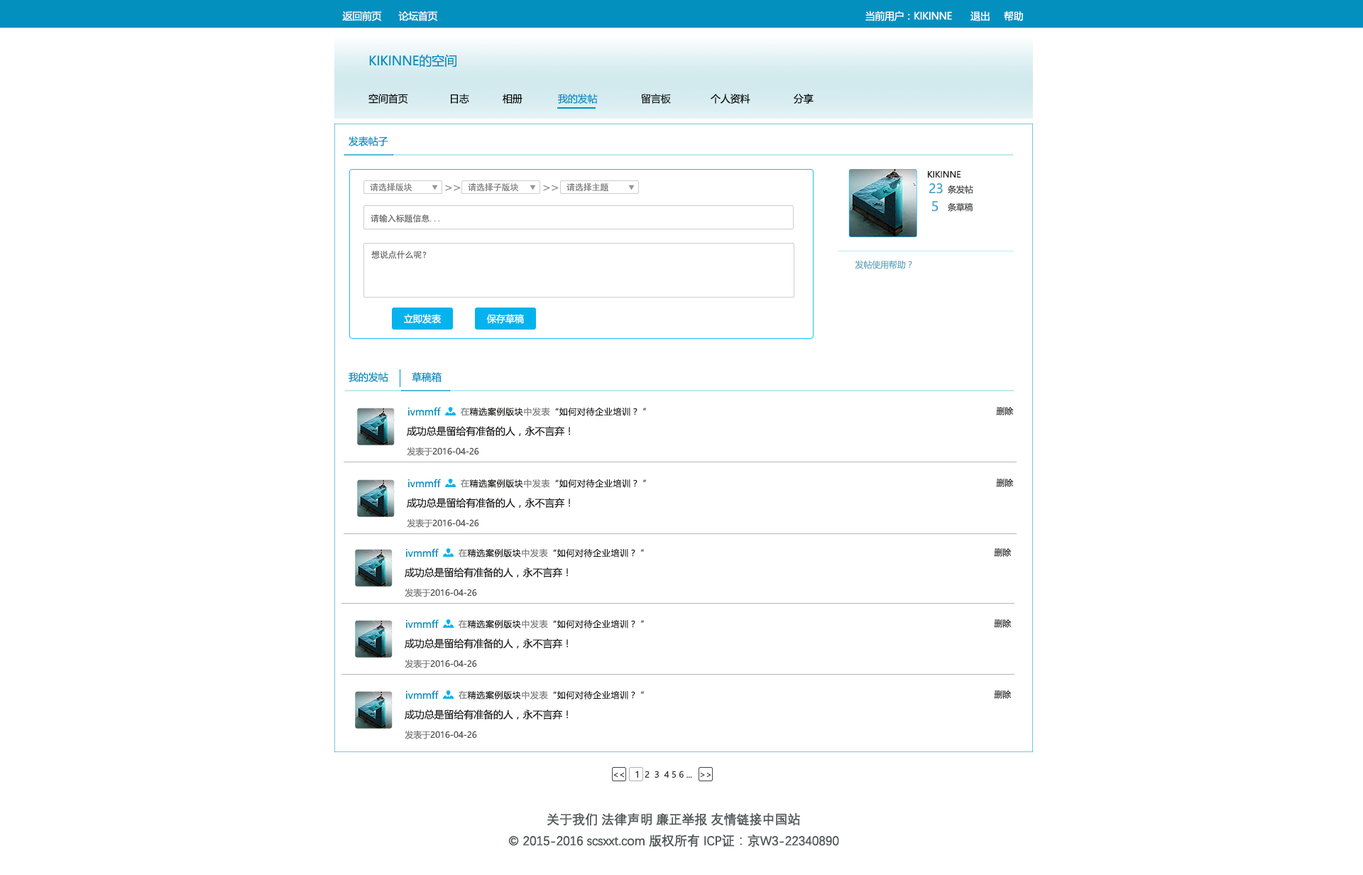
<style>
.page{position:relative;width:1363px;height:875px;background:#ffffff}
.page>*{position:absolute;margin:0}
.t1{font:9.9px "MicrosoftYaHei";letter-spacing:-0.025em;color:#ffffff}
.t2{font:12.8px "MicrosoftYaHei";letter-spacing:-0.01em;color:#0390bf}
.t3{font:9.9px "MicrosoftYaHei";letter-spacing:-0.01em;color:#111111}
.t4{font:9.9px "MicrosoftYaHei";letter-spacing:-0.01em;color:#040404}
.t5{font:9.9px "MicrosoftYaHei";letter-spacing:-0.01em;color:#0390bf}
.t6{font:9.9px "MicrosoftYaHei";letter-spacing:-0.01em;color:#1f1f1f}
.t7{font:8.5px "MicrosoftYaHei";letter-spacing:-0.01em;color:#1a1b1b}
.t8{font:8.5px "SimHei";letter-spacing:-0.01em;color:#7a7a7b}
.t9{font:12.8px "MicrosoftYaHei";letter-spacing:-0.01em;color:#4ea5ca}
.t10{font:8.5px "MicrosoftYaHei";letter-spacing:-0.01em;color:#454646}
.t11{font:8.5px "SimHei";letter-spacing:-0.01em;color:#6b6b6d}
.t12{font:8.5px "MicrosoftYaHei";letter-spacing:-0.01em;color:#69a9bf}
.t13{font:9.3px "MicrosoftYaHei";letter-spacing:-0.01em;color:#ffffff}
.t14{font:8.5px "MicrosoftYaHei";letter-spacing:0.05em;color:#1a1a19}
.t15{font:8.5px "MicrosoftYaHei";letter-spacing:0.05em;color:#7f7d7d}
.t16{font:8.5px "MicrosoftYaHei";letter-spacing:0.05em;color:#1b1b1a}
.t17{font:8.5px "MicrosoftYaHei";letter-spacing:-0.01em;color:#2e2d2d}
.t18{font:9.9px "MicrosoftYaHei";letter-spacing:-0.01em;color:#1a1a1a}
.t19{font:8.5px "MicrosoftYaHei";letter-spacing:-0.01em;color:#535353}
.t20{font:8.5px "MicrosoftYaHei";letter-spacing:-0.01em;color:#7a7a7a}
.t21{font:8.5px "MicrosoftYaHei";letter-spacing:-0.01em;color:#38393a}
.t22{font:8.5px "MicrosoftYaHei";letter-spacing:-0.01em;color:#252626}
.t23{font:12.8px/21.3px "DengXian-Regular";letter-spacing:-0.025em;color:#545a5c;font-weight:bold}
</style>
<div class="page">
<p class="t1" style="left:342px;top:11px;width:40px;height:10px">返回前页</p>
<p class="t1" style="left:398px;top:11px;width:40px;height:10px">论坛首页</p>
<p class="t1" style="left:865px;top:11px;width:87px;height:10px">当前用户：KIKINNE</p>
<p class="t1" style="left:971px;top:11px;width:19px;height:10px">退出</p>
<p class="t1" style="left:1004px;top:11px;width:19px;height:10px">帮助</p>
<p class="t2" style="left:369px;top:54px;width:88px;height:13px">KIKINNE的空间</p>
<p class="t3" style="left:368px;top:94px;width:40px;height:10px">空间首页</p>
<p class="t4" style="left:451px;top:94px;width:18px;height:10px">日志</p>
<p class="t4" style="left:503px;top:94px;width:20px;height:10px">相册</p>
<p class="t5" style="left:558px;top:94px;width:40px;height:10px">我的发帖</p>
<p class="t6" style="left:641px;top:94px;width:30px;height:10px">留言板</p>
<p class="t4" style="left:711px;top:94px;width:39px;height:10px">个人资料</p>
<p class="t4" style="left:794px;top:94px;width:20px;height:10px">分享</p>
<p class="t5" style="left:349px;top:136px;width:39px;height:10px">发表帖子</p>
<p class="t7" style="left:928px;top:170px;width:33px;height:8px">KIKINNE</p>
<p class="t8" style="left:370px;top:183px;width:43px;height:9px">请选择版块</p>
<p class="t8" style="left:445px;top:185px;width:16px;height:6px">＞＞</p>
<p class="t8" style="left:468px;top:183px;width:50px;height:9px">请选择子版块</p>
<p class="t8" style="left:543px;top:185px;width:16px;height:6px">＞＞</p>
<p class="t8" style="left:567px;top:183px;width:41px;height:9px">请选择主题</p>
<p class="t9" style="left:929px;top:183px;width:14px;height:11px">23</p>
<p class="t10" style="left:948px;top:185px;width:25px;height:9px">条发帖</p>
<p class="t9" style="left:932px;top:201px;width:7px;height:11px">５</p>
<p class="t10" style="left:948px;top:202px;width:25px;height:10px">条草稿</p>
<p class="t11" style="left:371px;top:214px;width:68px;height:9px">请输入标题信息...</p>
<p class="t11" style="left:371px;top:251px;width:56px;height:8px">想说点什么呢？</p>
<p class="t12" style="left:855px;top:260px;width:57px;height:9px">发帖使用帮助？</p>
<p class="t13" style="left:404px;top:314px;width:37px;height:10px">立即发表</p>
<p class="t13" style="left:486px;top:314px;width:38px;height:10px">保存草稿</p>
<p class="t5" style="left:349px;top:372px;width:39px;height:10px">我的发帖</p>
<p class="t5" style="left:412px;top:372px;width:30px;height:10px">草稿箱</p>
<p class="t5" style="left:408px;top:407px;width:33px;height:8px">ivmmff</p>
<p class="t14" style="left:461px;top:407px;width:185px;height:9px"><span class="t15">在</span><span class="t16">精选案例版块</span><span class="t15">中发表</span>“如何对待企业培训？ ”</p>
<p class="t17" style="left:996px;top:406px;width:18px;height:9px">删除</p>
<p class="t18" style="left:407px;top:426px;width:163px;height:10px">成功总是留给有准备的人，永不言弃！</p>
<p class="t19" style="left:407px;top:447px;width:72px;height:9px"><span class="t20"> 发表于</span>2016-04-26</p>
<p class="t5" style="left:408px;top:479px;width:33px;height:8px">ivmmff</p>
<p class="t14" style="left:461px;top:479px;width:185px;height:9px"><span class="t15">在</span><span class="t16">精选案例版块</span><span class="t15">中发表</span>“如何对待企业培训？ ”</p>
<p class="t17" style="left:996px;top:478px;width:18px;height:9px">删除</p>
<p class="t18" style="left:407px;top:498px;width:163px;height:10px">成功总是留给有准备的人，永不言弃！</p>
<p class="t19" style="left:407px;top:518px;width:72px;height:10px"><span class="t20"> 发表于</span>2016-04-26</p>
<p class="t5" style="left:406px;top:548px;width:33px;height:9px">ivmmff</p>
<p class="t14" style="left:459px;top:548px;width:185px;height:9px"><span class="t15">在</span><span class="t16">精选案例版块</span><span class="t15">中发表</span>“如何对待企业培训？ ”</p>
<p class="t17" style="left:994px;top:547px;width:18px;height:10px">删除</p>
<p class="t18" style="left:405px;top:567px;width:163px;height:10px">成功总是留给有准备的人，永不言弃！</p>
<p class="t19" style="left:405px;top:588px;width:72px;height:9px"><span class="t20"> 发表于</span>2016-04-26</p>
<p class="t5" style="left:406px;top:619px;width:33px;height:9px">ivmmff</p>
<p class="t14" style="left:459px;top:619px;width:185px;height:9px"><span class="t15">在</span><span class="t16">精选案例版块</span><span class="t15">中发表</span>“如何对待企业培训？ ”</p>
<p class="t17" style="left:994px;top:618px;width:18px;height:10px">删除</p>
<p class="t18" style="left:405px;top:638px;width:163px;height:10px">成功总是留给有准备的人，永不言弃！</p>
<p class="t19" style="left:405px;top:659px;width:72px;height:9px"><span class="t20"> 发表于</span>2016-04-26</p>
<p class="t17" style="left:994px;top:689px;width:18px;height:10px">删除</p>
<p class="t5" style="left:406px;top:690px;width:33px;height:9px">ivmmff</p>
<p class="t14" style="left:459px;top:690px;width:185px;height:9px"><span class="t15">在</span><span class="t16">精选案例版块</span><span class="t15">中发表</span>“如何对待企业培训？ ”</p>
<p class="t18" style="left:405px;top:709px;width:163px;height:10px">成功总是留给有准备的人，永不言弃！</p>
<p class="t19" style="left:405px;top:730px;width:72px;height:9px"><span class="t20"> 发表于</span>2016-04-26</p>
<p class="t21" style="left:613px;top:770px;width:98px;height:8px">&lt;&lt;    1  2 <span class="t22"> 3</span>  4 5 6 ...   &gt;&gt;</p>
<p class="t23" style="left:508px;top:812px;width:331px;height:35px;text-align:center">关于我们 法律声明 廉正举报 友情链接中国站<br>© 2015-2016 scsxxt.com 版权所有 ICP证：京W3-22340890</p>
</div>
